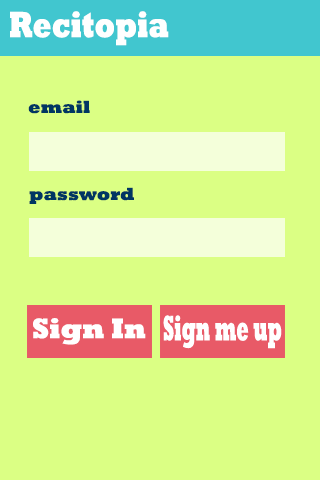
<style>
.page{position:relative;width:320px;height:480px;background:#dbff84}
.page>*{position:absolute;margin:0}
.t1{font:37px "Rockwell-ExtraBold";color:#ffffff;scale:0.75 1}
.t2{font:18px "Rockwell-ExtraBold";color:#003663}
.t3{font:28.8px "Rockwell-ExtraBold";color:#ffffff;scale:0.96 1}
</style>
<div class="page">
<p class="t1" style="left:10px;top:11px;width:159px;height:35px">Recitopia</p>
<p class="t2" style="left:28px;top:100px;width:62px;height:14px">email</p>
<p class="t2" style="left:29px;top:187px;width:105px;height:17px">password</p>
<p class="t3" style="left:33px;top:318px;width:113px;height:27px">Sign In</p>
</div>
